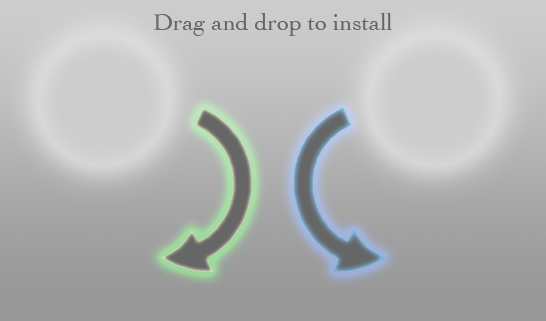
<style>
.page{position:relative;width:546px;height:321px}
.page>*{position:absolute;margin:0}
.t1{font:24px "Cochin";color:#666666}
</style>
<div class="page">
<p class="t1" style="left:153px;top:13px;width:239px;height:23px">Drag and drop to install</p>
</div>
